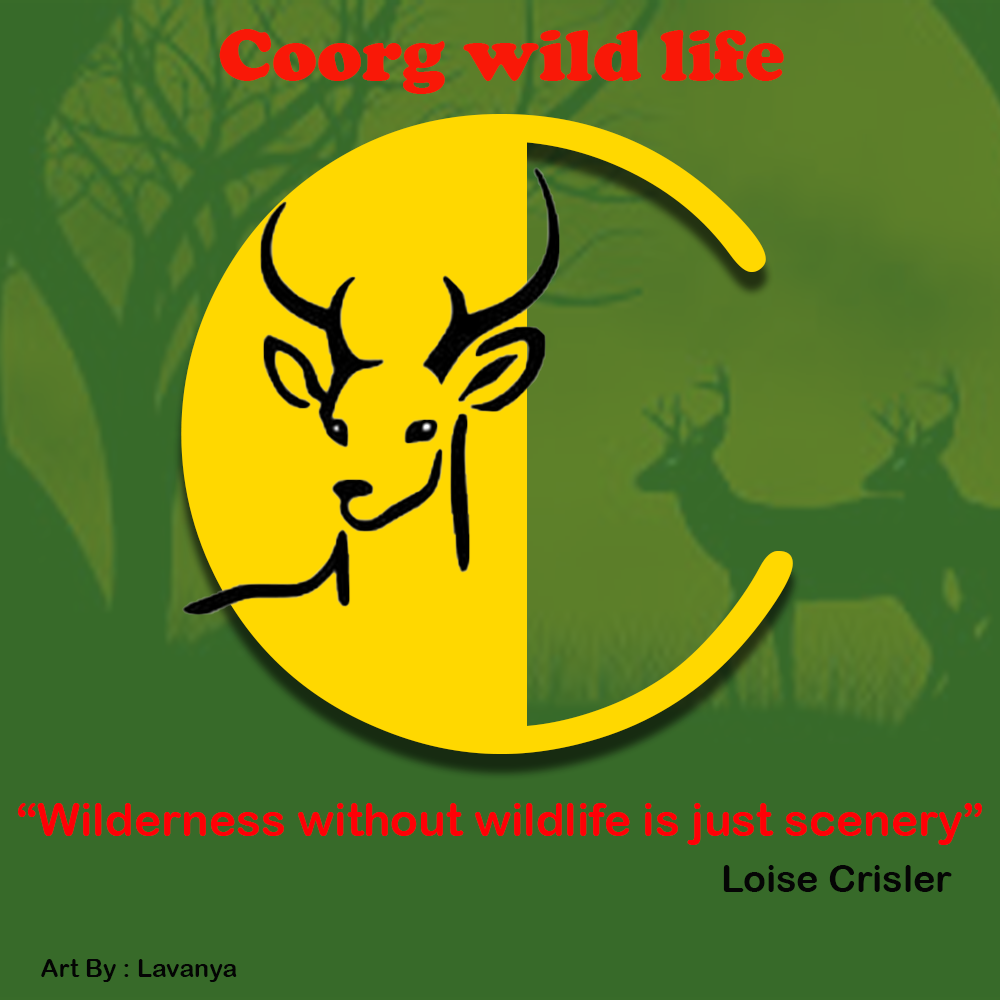
<style>
.page{position:relative;width:1000px;height:1000px;background:#376a29}
.page>*{position:absolute;margin:0}
.t1{font:75px "CooperBlack";color:#f91807}
.t2{font:906.5px "Broadway";color:#ffd800}
.t3{font:45.8px "ArialRoundedMTBold";color:#ff0006}
.t4{font:37.5px "ArialRoundedMTBold";color:#050505}
.t5{font:25px "ArialRoundedMTBold";color:#040404}
</style>
<div class="page">
<p class="t1" style="left:219px;top:29px;width:565px;height:65px">Coorg wild life</p>
<p class="t2" style="left:181px;top:114px;width:612px;height:640px">C</p>
<p class="t3" style="left:18px;top:803px;width:964px;height:42px">“Wilderness without wildlife is just scenery”</p>
<p class="t4" style="left:723px;top:865px;width:229px;height:27px">Loise Crisler</p>
<p class="t5" style="left:41px;top:959px;width:196px;height:23px">Art By : Lavanya</p>
</div>
